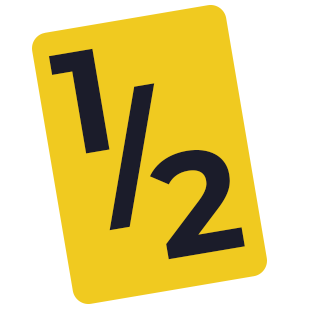
<style>
.page{position:relative;width:310px;height:310px;background:#f0ca20}
.page>*{position:absolute;margin:0}
.t1{font:145.8px "Montserrat-Bold";color:#1b1c2a}
</style>
<div class="page">
<p class="t1" style="left:48px;top:48px;width:62px;height:106px;rotate:-10deg">1</p>
<p class="t1" style="left:109px;top:83px;width:46px;height:148px;rotate:-10deg">/</p>
<p class="t1" style="left:149px;top:150px;width:96px;height:110px;rotate:-10deg">2</p>
</div>
